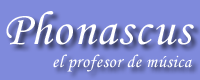
<style>
.page{position:relative;width:200px;height:80px;background:#7f8adc}
.page>*{position:absolute;margin:0}
.t1{font:48px "MonotypeCorsiva";letter-spacing:0.025em;color:#ffffff}
.t2{font:18px "MonotypeCorsiva";letter-spacing:0.025em;color:#ffffff}
</style>
<div class="page">
<p class="t1" style="left:6px;top:11px;width:188px;height:34px">Phonascus</p>
<p class="t2" style="left:53px;top:54px;width:139px;height:18px">el profesor de música</p>
</div>
